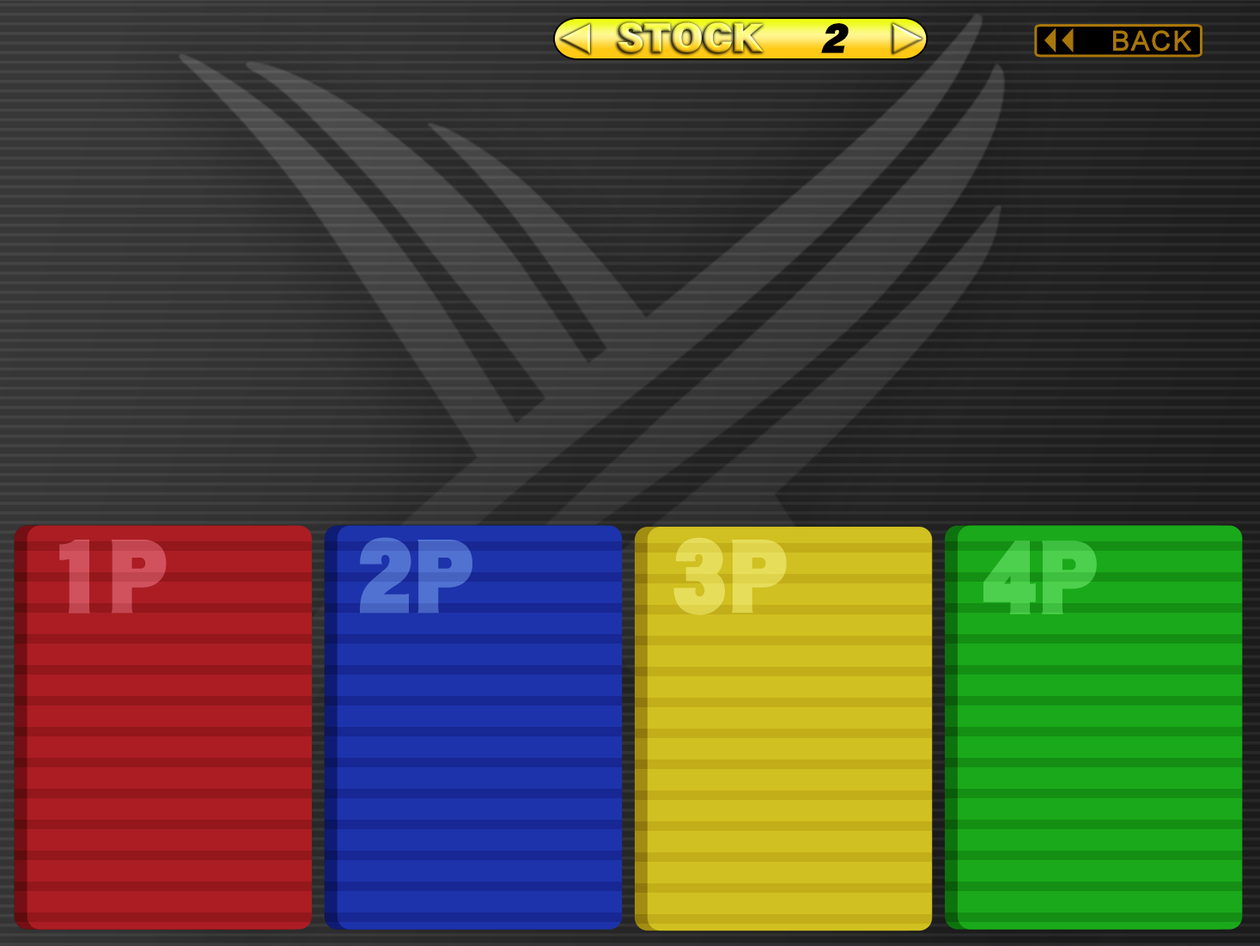
<style>
.page{position:relative;width:1260px;height:946px}
.page>*{position:absolute;margin:0}
.t1{font:35.9px "DFGothic-SU-WING-RKSJ-H";scale:1.14 1}
.t2{font:36.8px "DFGothic-SU-WING-RKSJ-H";color:#000000;font-style:italic;scale:1.14 1}
.t3{font:27.2px "ArialMT";color:#a8760b;text-transform:uppercase;font-weight:bold}
.t4{font:93px "DFGothic-SU-WING-RKSJ-H";color:#d1525d}
.t5{font:93px "DFGothic-SU-WING-RKSJ-H";color:#5272d1}
.t6{font:93px "DFGothic-SU-WING-RKSJ-H";color:#e6dd5a}
.t7{font:93px "DFGothic-SU-WING-RKSJ-H";color:#4dd04d}
</style>
<div class="page">
<p class="t1" style="left:618px;top:22px;width:146px;height:30px">STOCK</p>
<p class="t2" style="left:821px;top:23px;width:28px;height:30px">2</p>
<p class="t3" style="left:1114px;top:30px;width:79px;height:22px">back</p>
<p class="t4" style="left:59px;top:540px;width:108px;height:73px">1P</p>
<p class="t5" style="left:360px;top:537px;width:113px;height:76px">2P</p>
<p class="t6" style="left:674px;top:537px;width:113px;height:78px">3P</p>
<p class="t7" style="left:984px;top:540px;width:113px;height:74px">4P</p>
</div>
